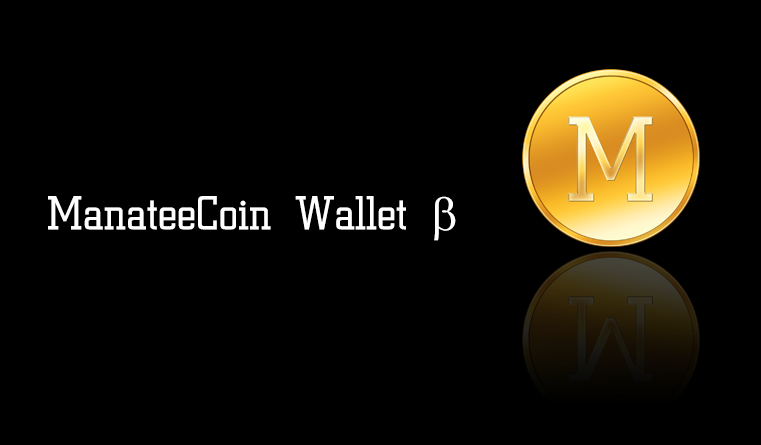
<style>
.page{position:relative;width:761px;height:445px;background:#000000}
.page>*{position:absolute;margin:0}
.t1{font:48px "HJÇÑÀü¼­B";color:#ffffff}
.t2{font:48px "SymbolMT";color:#ffffff}
</style>
<div class="page">
<p class="t1" style="left:48px;top:196px;width:408px;height:45px">ManateeCoin Wallet <span class="t2">β</span></p>
</div>
